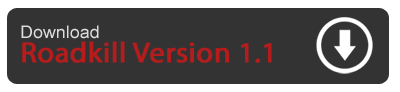
<style>
.page{position:relative;width:400px;height:92px;background:#333333}
.page>*{position:absolute;margin:0}
.t1{font:28.8px/24px "MyriadPro-Regular";color:#b71c1d;font-weight:bold;scale:1.04 1}
.t2{font:17.2px/24px "ArialMT";color:#dddddd;scale:1.04 1}
</style>
<div class="page">
<p class="t1" style="left:21px;top:25px;width:251px;height:38px"><span class="t2">Download<br></span>Roadkill Version 1.1</p>
</div>
